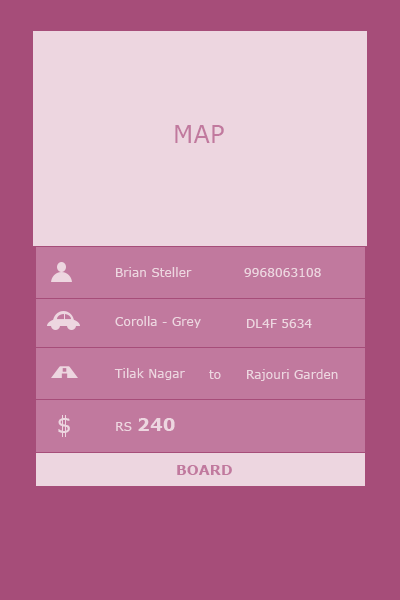
<style>
.page{position:relative;width:400px;height:600px;background:#a64d79}
.page>*{position:absolute;margin:0}
.t1{font:24px "Verdana";letter-spacing:0.01em;color:#c1799e}
.t2{font:12px "Verdana";letter-spacing:0.01em;color:#edd6e0}
.t3{font:19.6px "Verdana";letter-spacing:0.01em;color:#edd6e0;scale:1.04 1}
.t4{font:18px "Verdana-Bold";letter-spacing:0.01em;color:#edd6e0}
.t5{font:14px "Verdana-Bold";letter-spacing:0.01em;color:#c1799e}
</style>
<div class="page">
<p class="t1" style="left:175px;top:125px;width:49px;height:18px">MAP</p>
<p class="t2" style="left:116px;top:267px;width:76px;height:10px">Brian Steller</p>
<p class="t2" style="left:244px;top:268px;width:77px;height:9px">9968063108</p>
<p class="t2" style="left:115px;top:316px;width:86px;height:12px">Corolla - Grey</p>
<p class="t2" style="left:247px;top:319px;width:65px;height:9px">DL4F 5634</p>
<p class="t2" style="left:114px;top:368px;width:71px;height:12px">Tilak Nagar</p>
<p class="t2" style="left:209px;top:370px;width:12px;height:9px">to</p>
<p class="t2" style="left:247px;top:369px;width:91px;height:12px">Rajouri Garden</p>
<p class="t3" style="left:58px;top:418px;width:12px;height:15px">S</p>
<p class="t2" style="left:116px;top:422px;width:16px;height:9px">RS</p>
<p class="t4" style="left:138px;top:418px;width:37px;height:13px">240</p>
<p class="t5" style="left:177px;top:465px;width:55px;height:10px">BOARD</p>
</div>
